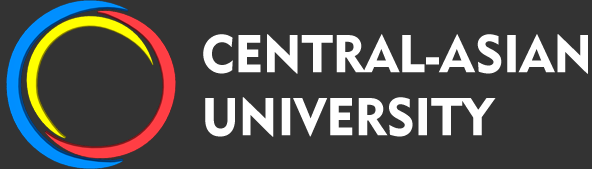
<style>
.page{position:relative;width:592px;height:169px;background:#333333}
.page>*{position:absolute;margin:0}
.t1{font:52.5px "Geometric415BT-BlackA";color:#ffffff;scale:0.96 1}
</style>
<div class="page">
<p class="t1" style="left:203px;top:34px;width:385px;height:103px;text-align:right">CENTRAL-ASIAN<br>UNIVERSITY</p>
</div>
